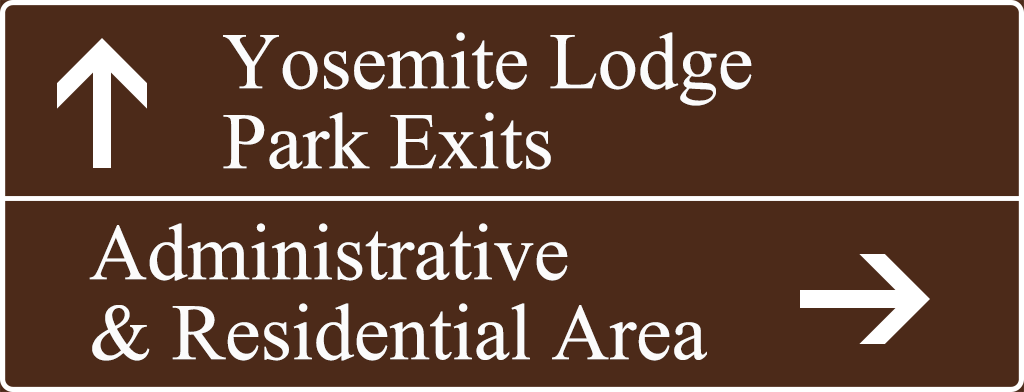
<style>
.page{position:relative;width:1024px;height:392px;background:#4c2a19}
.page>*{position:absolute;margin:0}
.t1{font:80px/80px "IskoolaPota";color:#fbfbfb}
</style>
<div class="page">
<p class="t1" style="left:223px;top:32px;width:529px;height:138px">Yosemite Lodge<br>Park Exits</p>
<p class="t1" style="left:89px;top:223px;width:618px;height:138px">Administrative <br>&amp; Residential Area</p>
</div>
